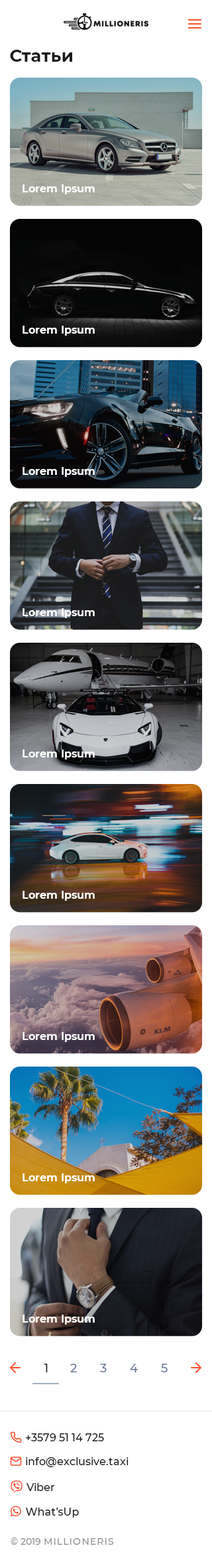
<style>
.page{position:relative;width:212px;height:1568px;background:#ffffff}
.page>*{position:absolute;margin:0}
.t1{font:17.2px "Montserrat-Bold";color:#171919}
.t2{font:10.6px "Montserrat-Bold";color:#ffffff}
.t3{font:11.9px "Montserrat-Medium";color:#171919}
.t4{font:11.9px "Montserrat-Medium";color:#6a7996}
.t5{font:10.6px "Montserrat-Medium";color:#171919}
.t6{font:9.3px "Montserrat-Medium";letter-spacing:0.1em;color:#929292}
.t7{font:9.3px "Montserrat-Medium";color:#929292}
</style>
<div class="page">
<p class="t1" style="left:10px;top:50px;width:62px;height:12px">Статьи</p>
<p class="t2" style="left:23px;top:184px;width:72px;height:10px">Lorem Ipsum</p>
<p class="t2" style="left:23px;top:326px;width:72px;height:10px">Lorem Ipsum</p>
<p class="t2" style="left:23px;top:467px;width:72px;height:10px">Lorem Ipsum</p>
<p class="t2" style="left:23px;top:608px;width:72px;height:10px">Lorem Ipsum</p>
<p class="t2" style="left:23px;top:750px;width:72px;height:9px">Lorem Ipsum</p>
<p class="t2" style="left:23px;top:891px;width:72px;height:10px">Lorem Ipsum</p>
<p class="t2" style="left:23px;top:1032px;width:72px;height:10px">Lorem Ipsum</p>
<p class="t2" style="left:23px;top:1173px;width:72px;height:10px">Lorem Ipsum</p>
<p class="t2" style="left:23px;top:1315px;width:72px;height:10px">Lorem Ipsum</p>
<p class="t3" style="left:44px;top:1364px;width:4px;height:8px">1</p>
<p class="t4" style="left:70px;top:1364px;width:7px;height:8px">2</p>
<p class="t4" style="left:100px;top:1364px;width:7px;height:8px">3</p>
<p class="t4" style="left:130px;top:1364px;width:8px;height:8px">4</p>
<p class="t4" style="left:161px;top:1364px;width:7px;height:8px">5</p>
<p class="t5" style="left:26px;top:1433px;width:78px;height:8px">+3579 51 14 725</p>
<p class="t5" style="left:26px;top:1457px;width:103px;height:10px">info@exclusive.taxi</p>
<p class="t6" style="left:11px;top:1537px;width:103px;height:8px"><span class="t7">© 2019 </span>MILLIONERIS</p>
</div>
